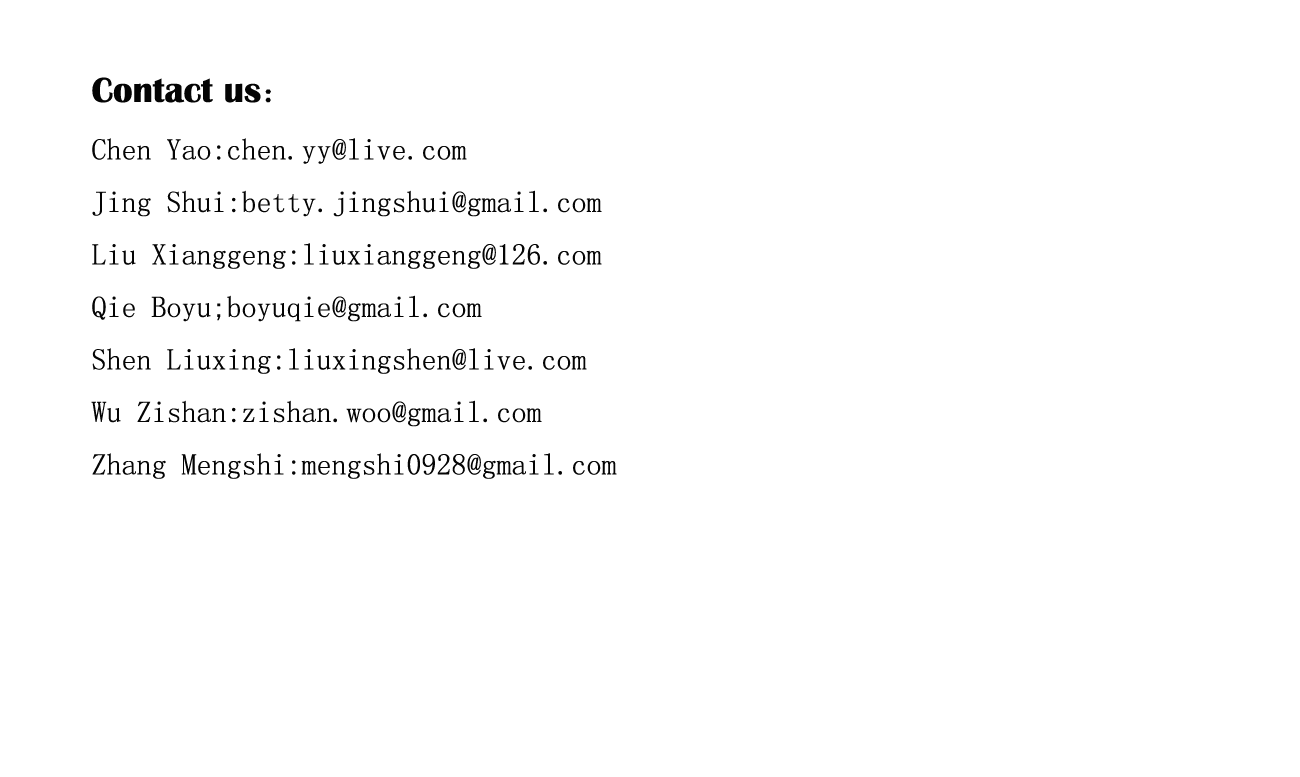
<style>
.page{position:relative;width:1300px;height:777px;background:#ffffff}
.page>*{position:absolute;margin:0}
.t1{font:30px "SimSun";color:#040404}
.t2{font:36px "BritannicBold";color:#040404}
.t3{font:36px "SimSun";color:#040404}
</style>
<div class="page">
<p class="t1" style="left:91px;top:77px;width:526px;height:402px"><span class="t2">Contact us</span><span class="t3">：<br></span>Chen Yao:chen.yy@live.com<br>Jing Shui:betty.jingshui@gmail.com<br>Liu Xianggeng:liuxianggeng@126.com<br>Qie Boyu;boyuqie@gmail.com<br>Shen Liuxing:liuxingshen@live.com<br>Wu Zishan:zishan.woo@gmail.com<br>Zhang Mengshi:mengshi0928@gmail.com</p>
</div>
